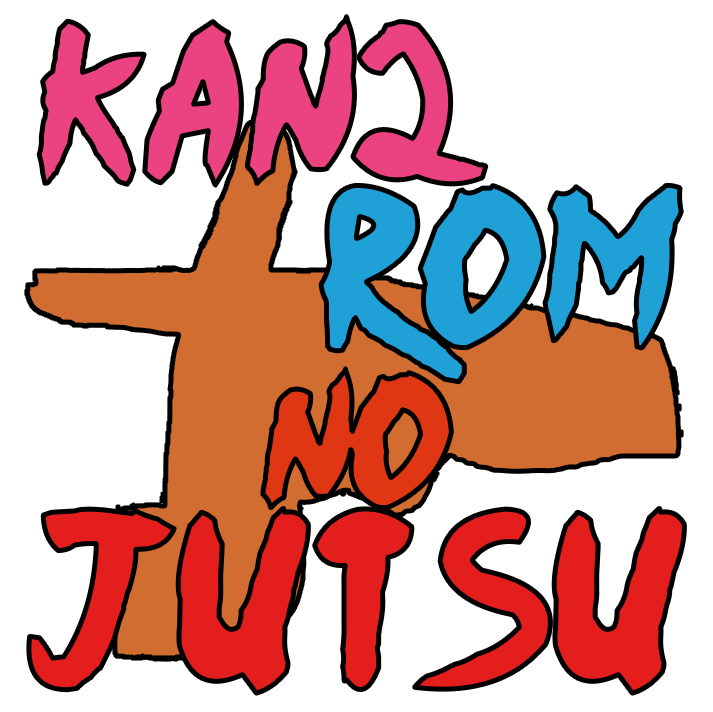
<style>
.page{position:relative;width:713px;height:712px;background:#ffffff}
.page>*{position:absolute;margin:0}
.t1{font:180px "Ninja-Naruto";color:#eb4282}
.t2{font:180px "Ninja-Naruto";color:#1fa1d7}
.t3{font:150px "Ninja-Naruto";color:#df3614}
.t4{font:200px "Ninja-Naruto";color:#e41d1d}
</style>
<div class="page">
<p class="t1" style="left:39px;top:16px;width:447px;height:170px">Kan2</p>
<p class="t2" style="left:321px;top:185px;width:361px;height:197px">Rom</p>
<p class="t3" style="left:262px;top:368px;width:190px;height:140px">no</p>
<p class="t4" style="left:28px;top:508px;width:657px;height:186px">Jutsu</p>
</div>
